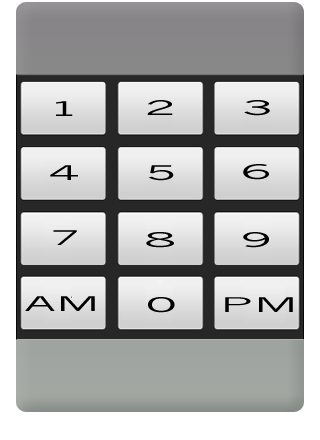
<style>
.page{position:relative;width:320px;height:440px}
.page>*{position:absolute;margin:0}
.t1{font:20px "NewsGothicMT";color:#000000;scale:2.5 1}
</style>
<div class="page">
<p class="t1" style="left:56px;top:101px;width:17px;height:15px">1</p>
<p class="t1" style="left:147px;top:100px;width:26px;height:15px">2</p>
<p class="t1" style="left:244px;top:100px;width:26px;height:16px">3</p>
<p class="t1" style="left:50px;top:165px;width:28px;height:15px">4</p>
<p class="t1" style="left:148px;top:165px;width:26px;height:16px">5</p>
<p class="t1" style="left:243px;top:164px;width:26px;height:16px">6</p>
<p class="t1" style="left:53px;top:230px;width:24px;height:15px">7</p>
<p class="t1" style="left:146px;top:232px;width:28px;height:16px">8</p>
<p class="t1" style="left:243px;top:232px;width:26px;height:16px">9</p>
<p class="t1" style="left:25px;top:296px;width:70px;height:15px">AM</p>
<p class="t1" style="left:148px;top:297px;width:27px;height:16px">0</p>
<p class="t1" style="left:225px;top:297px;width:68px;height:15px">PM</p>
</div>
